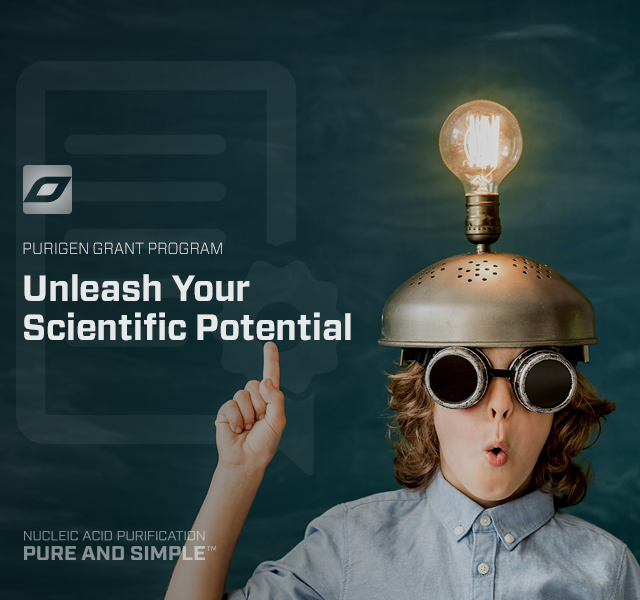
<style>
.page{position:relative;width:640px;height:600px}
.page>*{position:absolute;margin:0}
.t1{font:16px "Forza-Light";letter-spacing:-0.005em;color:#e7e8e8;text-transform:uppercase}
.t2{font:36.1px/38.5px "Forza-Bold";letter-spacing:-0.005em;color:#e7e8e9}
</style>
<div class="page">
<p class="t1" style="left:23px;top:242px;width:199px;height:12px">Purigen Grant Program</p>
<p class="t2" style="left:24px;top:274px;width:327px;height:67px">Unleash Your<br>Scientific Potential</p>
</div>
